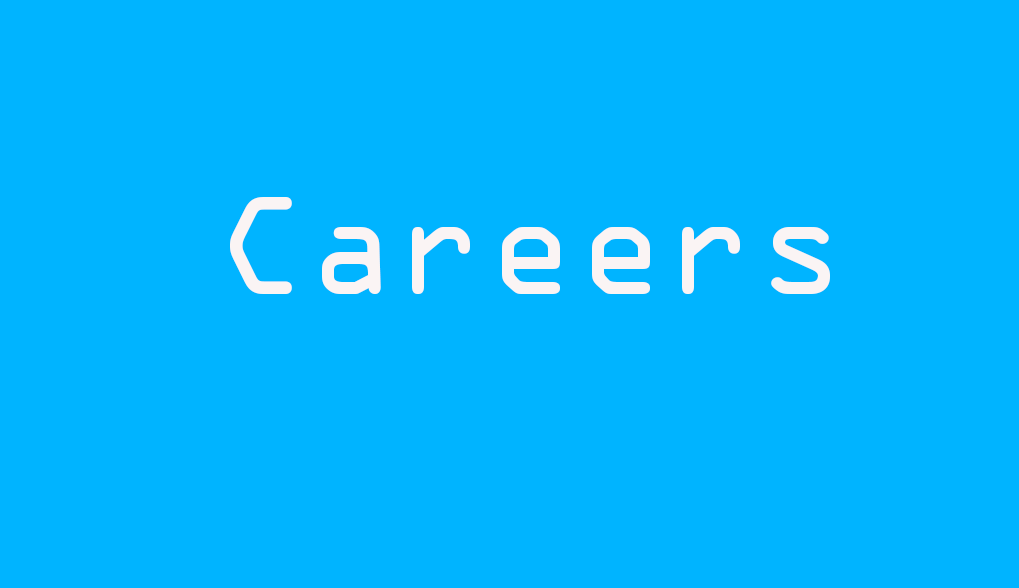
<style>
.page{position:relative;width:1019px;height:588px;background:#00b4ff}
.page>*{position:absolute;margin:0}
.t1{font:125px "OCRAStd";color:#faf4f4}
</style>
<div class="page">
<p class="t1" style="left:230px;top:197px;width:600px;height:97px">Careers</p>
</div>
